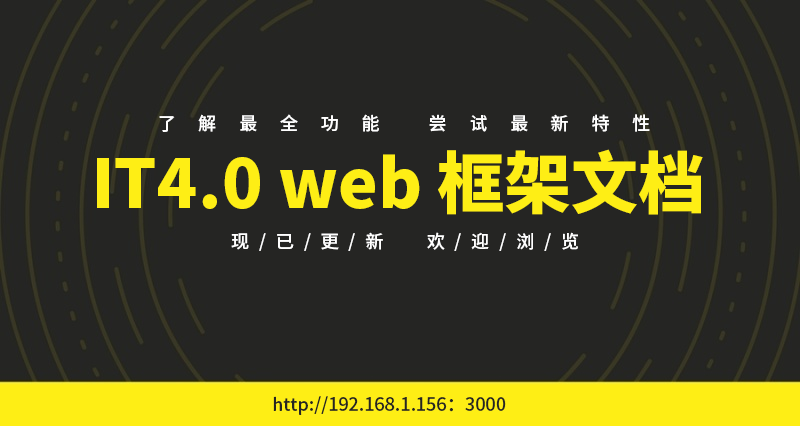
<style>
.page{position:relative;width:800px;height:426px;background:#252523}
.page>*{position:absolute;margin:0}
.t1{font:18px "SourceHanSansCN-Medium";letter-spacing:1.26em;color:#ffffff}
.t2{font:67px "SourceHanSansCN-Heavy";color:#feee15}
.t3{font:18px "SourceHanSansCN-Medium";letter-spacing:0.3em;color:#ffffff}
.t4{font:18px "SourceHanSansCN-Medium";color:#252523}
</style>
<div class="page">
<p class="t1" style="left:159px;top:114px;width:491px;height:18px">了解最全功能 尝试最新特性</p>
<p class="t2" style="left:97px;top:149px;width:606px;height:66px">IT4.0 web 框架文档</p>
<p class="t3" style="left:231px;top:232px;width:347px;height:19px">现/已/更/新    欢/迎/浏/览</p>
<p class="t4" style="left:273px;top:396px;width:233px;height:19px">http://192.168.1.156：3000</p>
</div>
